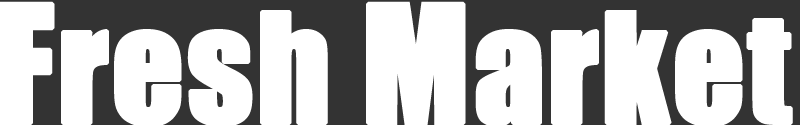
<style>
.page{position:relative;width:800px;height:125px;background:#ffffff}
.page>*{position:absolute;margin:0}
.t1{font:140px "Impact";color:#ffffff;font-weight:bold}
.t2{font:150px "Impact";color:#ffffff;font-weight:bold}
</style>
<div class="page">
<p class="t1" style="left:0px;top:1px;width:793px;height:126px"><span class="t2">F</span>resh <span class="t2">M</span>arket</p>
</div>
